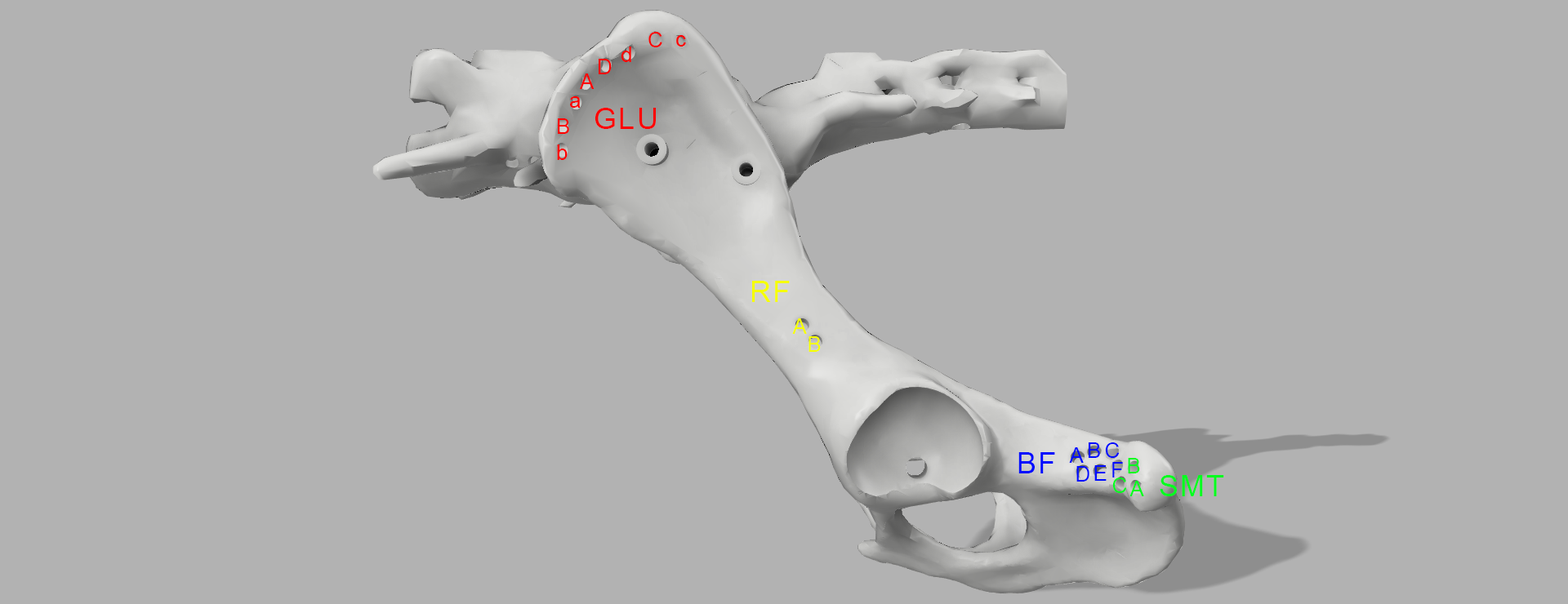
<style>
.page{position:relative;width:1568px;height:604px;background:#b2b2b2}
.page>*{position:absolute;margin:0}
.t1{font:21.2px "ArialMT";letter-spacing:0.06em;color:#ff0000}
.t2{font:29.4px "ArialMT";letter-spacing:0.06em;color:#ff0000}
.t3{font:29.4px "ArialMT";letter-spacing:0.06em;color:#f6ff00}
.t4{font:21.2px "ArialMT";letter-spacing:0.06em;color:#f6ff00}
.t5{font:21.2px "ArialMT";letter-spacing:0.06em;color:#000cff}
.t6{font:29.4px "ArialMT";letter-spacing:0.06em;color:#000cff}
.t7{font:21.2px "ArialMT";letter-spacing:0.06em;color:#00ff1e}
.t8{font:29.4px "ArialMT";letter-spacing:0.06em;color:#00ff1e}
</style>
<div class="page">
<p class="t1" style="left:648px;top:32px;width:14px;height:15px">C</p>
<p class="t1" style="left:676px;top:35px;width:10px;height:12px">c</p>
<p class="t1" style="left:621px;top:47px;width:10px;height:15px">d</p>
<p class="t1" style="left:599px;top:59px;width:13px;height:15px">D</p>
<p class="t1" style="left:580px;top:74px;width:15px;height:15px">A</p>
<p class="t1" style="left:570px;top:96px;width:11px;height:12px">a</p>
<p class="t2" style="left:595px;top:108px;width:61px;height:21px">GLU</p>
<p class="t1" style="left:558px;top:118px;width:11px;height:16px">B</p>
<p class="t1" style="left:557px;top:145px;width:11px;height:15px">b</p>
<p class="t3" style="left:752px;top:281px;width:38px;height:21px">RF</p>
<p class="t4" style="left:792px;top:318px;width:15px;height:16px">A</p>
<p class="t4" style="left:808px;top:336px;width:13px;height:16px">B</p>
<p class="t5" style="left:1069px;top:448px;width:15px;height:15px">A</p>
<p class="t5" style="left:1089px;top:443px;width:11px;height:15px">B</p>
<p class="t5" style="left:1105px;top:443px;width:15px;height:15px">C</p>
<p class="t6" style="left:1018px;top:452px;width:37px;height:22px">BF</p>
<p class="t7" style="left:1128px;top:458px;width:12px;height:16px">B</p>
<p class="t5" style="left:1076px;top:466px;width:13px;height:16px">D</p>
<p class="t5" style="left:1094px;top:466px;width:13px;height:15px">E</p>
<p class="t5" style="left:1112px;top:462px;width:11px;height:16px">F</p>
<p class="t7" style="left:1112px;top:478px;width:15px;height:15px">C</p>
<p class="t7" style="left:1129px;top:481px;width:15px;height:16px">A</p>
<p class="t8" style="left:1160px;top:475px;width:64px;height:22px">SMT</p>
</div>
